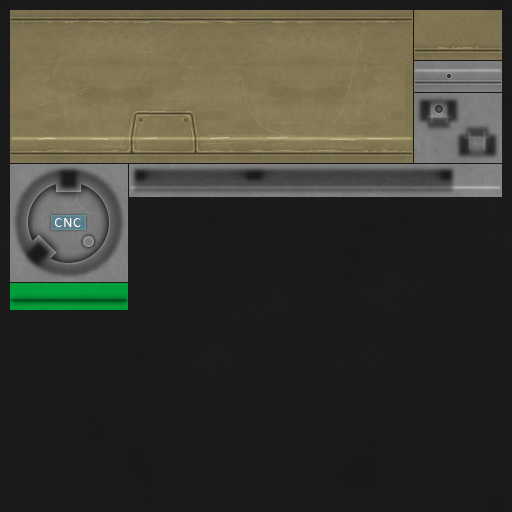
<style>
.page{position:relative;width:512px;height:512px;background:#1a1a1a}
.page>*{position:absolute;margin:0}
.t1{font:12px "SegoeUI";letter-spacing:0.1em;color:#ffffff}
</style>
<div class="page">
<p class="t1" style="left:55px;top:218px;width:26px;height:9px">CNC</p>
</div>
